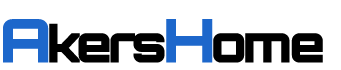
<style>
.page{position:relative;width:341px;height:70px;background:#ffffff}
.page>*{position:absolute;margin:0}
.t1{font:50.1px "Orbitron-Black";letter-spacing:-0.08em;color:#000000;scale:1.04 1}
.t2{font:60px "Orbitron-Black";letter-spacing:-0.08em;color:#1d67cb;scale:1.04 1}
</style>
<div class="page">
<p class="t1" style="left:3px;top:19px;width:320px;height:44px"><span class="t2">A</span>kers<span class="t2">H</span>ome</p>
</div>
